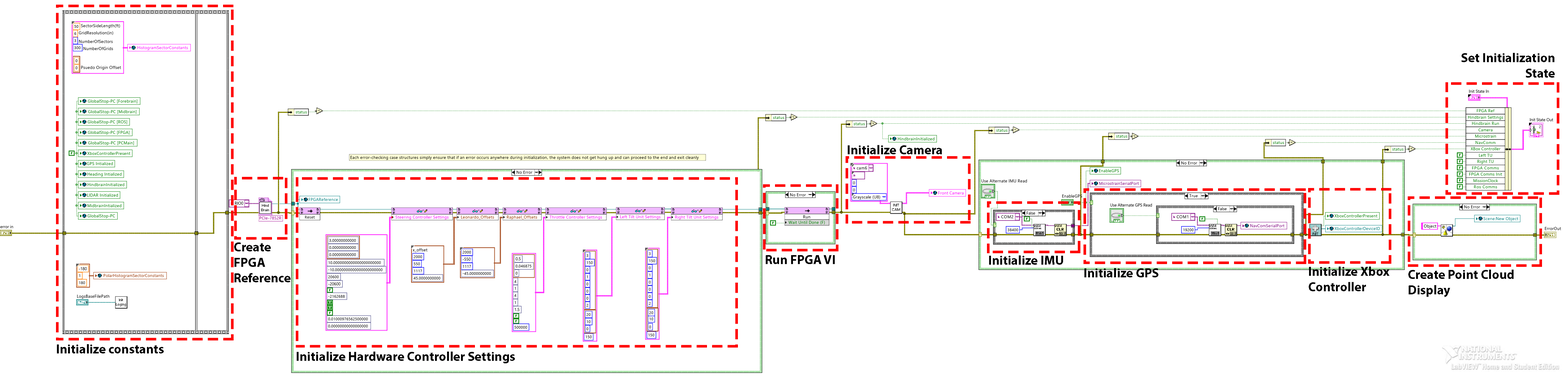
<style>
.page{position:relative;width:1568px;height:376px;background:#ffffff}
.page>*{position:absolute;margin:0}
.t1{font:12.9px "MyriadPro-Bold";color:#000000}
</style>
<div class="page">
<p class="t1" style="left:1462px;top:53px;width:93px;height:25px;text-align:right">Set Initialization State</p>
<p class="t1" style="left:848px;top:145px;width:94px;height:9px">Initialize Camera</p>
<p class="t1" style="left:234px;top:243px;width:57px;height:39px">Create <br>FPGA<br>Reference</p>
<p class="t1" style="left:766px;top:255px;width:69px;height:9px">Run FPGA VI</p>
<p class="t1" style="left:989px;top:256px;width:74px;height:9px">Initialize IMU</p>
<p class="t1" style="left:1084px;top:268px;width:74px;height:10px">Initialize GPS</p>
<p class="t1" style="left:1309px;top:267px;width:80px;height:24px">Initialize Xbox<br>Controller</p>
<p class="t1" style="left:1408px;top:270px;width:106px;height:27px">Create Point Cloud <br>Display</p>
<p class="t1" style="left:57px;top:344px;width:107px;height:10px">Initialize constants</p>
<p class="t1" style="left:297px;top:352px;width:218px;height:12px">Initialize Hardware Controller Settings</p>
</div>
